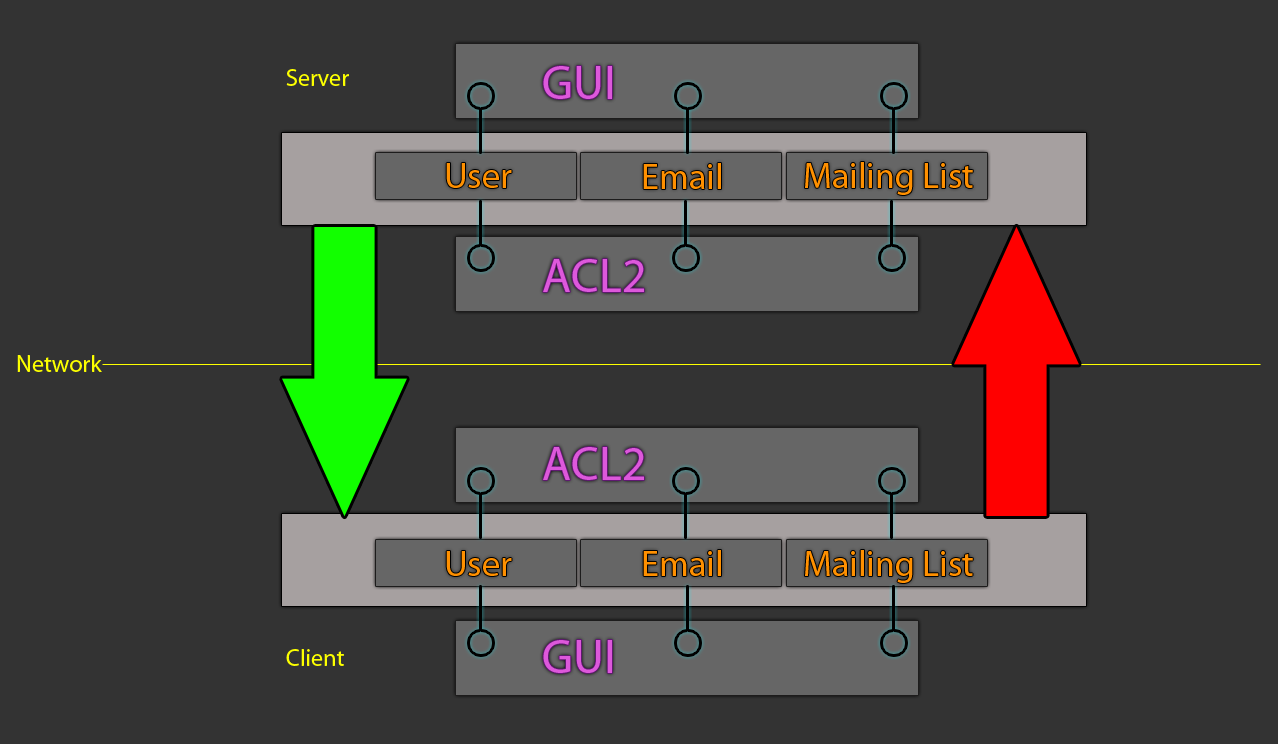
<style>
.page{position:relative;width:1278px;height:744px;background:#333333}
.page>*{position:absolute;margin:0}
.t1{font:24px "MyriadPro-Regular";color:#fcff00}
.t2{font:48px "MyriadPro-Regular";color:#dd58db}
.t3{font:36px "MyriadPro-Regular";color:#ff9000}
</style>
<div class="page">
<p class="t1" style="left:286px;top:69px;width:63px;height:17px">Server</p>
<p class="t2" style="left:543px;top:66px;width:69px;height:33px">GUI</p>
<p class="t3" style="left:446px;top:163px;width:66px;height:25px">User</p>
<p class="t3" style="left:643px;top:163px;width:78px;height:26px">Email</p>
<p class="t3" style="left:805px;top:162px;width:168px;height:33px">Mailing List</p>
<p class="t2" style="left:543px;top:259px;width:101px;height:33px">ACL2</p>
<p class="t1" style="left:17px;top:355px;width:85px;height:17px">Network</p>
<p class="t2" style="left:543px;top:447px;width:101px;height:33px">ACL2</p>
<p class="t3" style="left:446px;top:551px;width:66px;height:25px">User</p>
<p class="t3" style="left:643px;top:550px;width:78px;height:26px">Email</p>
<p class="t3" style="left:805px;top:550px;width:168px;height:33px">Mailing List</p>
<p class="t2" style="left:543px;top:640px;width:69px;height:33px">GUI</p>
<p class="t1" style="left:286px;top:649px;width:58px;height:17px">Client</p>
</div>
